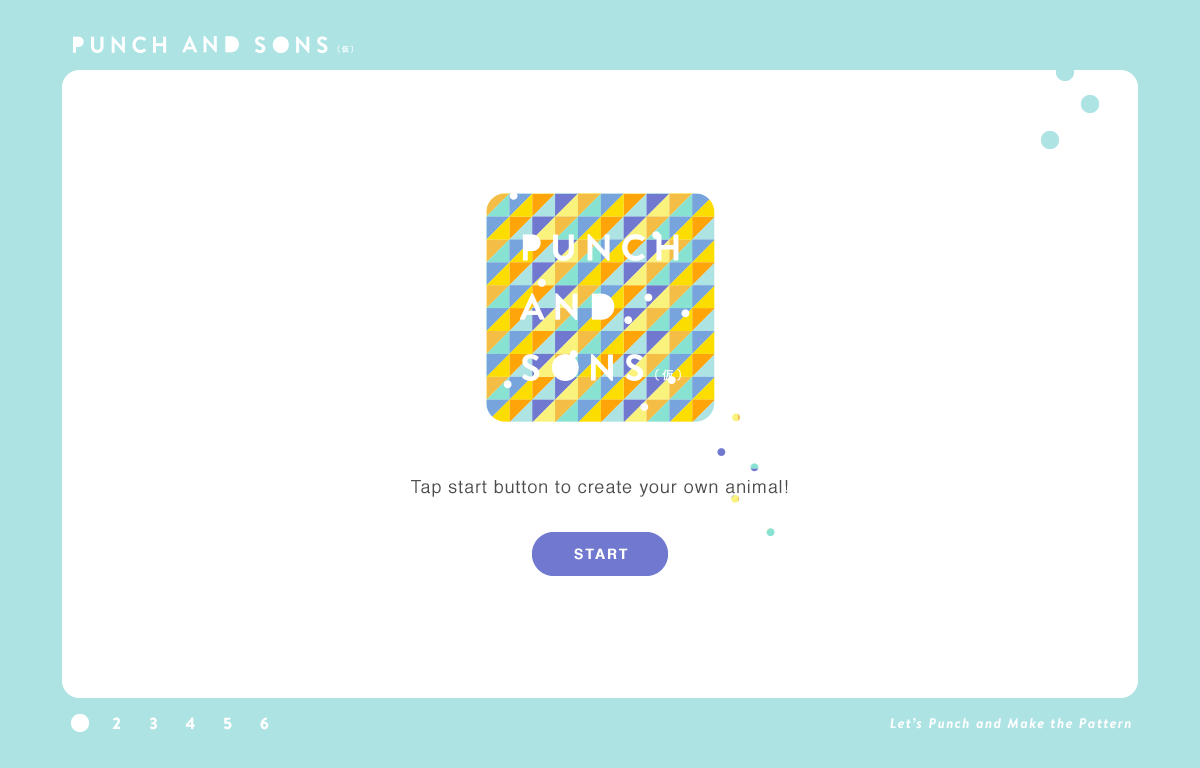
<style>
.page{position:relative;width:1200px;height:768px;background:#ffffff}
.page>*{position:absolute;margin:0}
.t1{font:18px "Helvetica";letter-spacing:0.05em;color:#4d4d4d}
.t2{font:14px "Helvetica-Bold";letter-spacing:0.13em;color:#ffffff}
.t3{font:16px "BrandonText-Black";letter-spacing:0.11em;color:#ffffff}
.t4{font:14px "BrandonText-BoldItalic";letter-spacing:0.11em;color:#ffffff}
</style>
<div class="page">
<p class="t1" style="left:411px;top:480px;width:377px;height:17px">Tap start button to create your own animal!</p>
<p class="t2" style="left:574px;top:548px;width:54px;height:12px">START</p>
<p class="t3" style="left:112px;top:717px;width:8px;height:12px">2</p>
<p class="t3" style="left:149px;top:717px;width:8px;height:13px">3</p>
<p class="t3" style="left:185px;top:717px;width:10px;height:12px">4</p>
<p class="t3" style="left:224px;top:717px;width:8px;height:13px">5</p>
<p class="t3" style="left:260px;top:717px;width:9px;height:13px">6</p>
<p class="t4" style="left:890px;top:718px;width:241px;height:11px">Let’s Punch and Make the Pattern</p>
</div>
